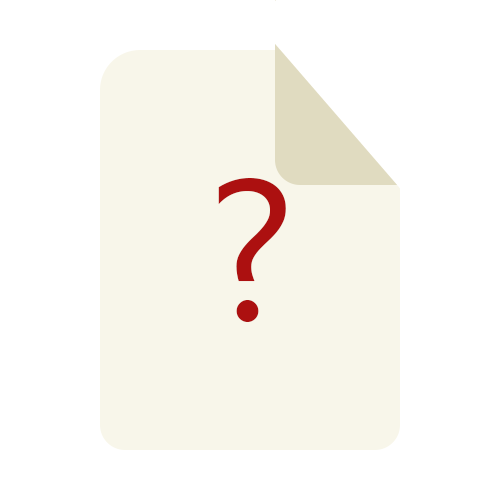
<style>
.page{position:relative;width:500px;height:500px;background:#ffffff}
.page>*{position:absolute;margin:0}
.t1{font:200px "MicrosoftTaiLe";color:#ac1010}
</style>
<div class="page">
<p class="t1" style="left:218px;top:178px;width:68px;height:144px">?</p>
</div>
